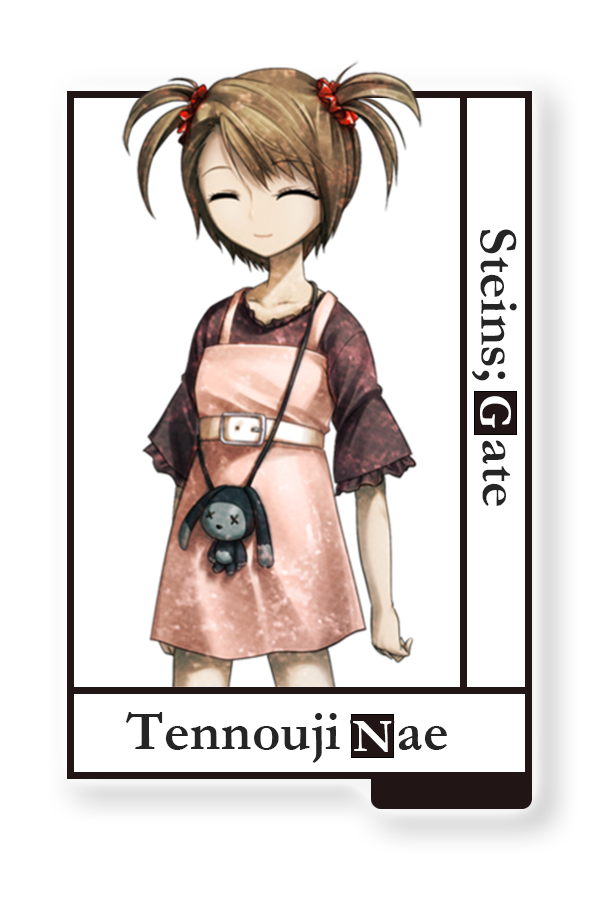
<style>
.page{position:relative;width:600px;height:900px;background:#ffffff}
.page>*{position:absolute;margin:0}
.t1{font:55.4px "Garamond-Bold";color:#252525}
.t2{font:47px "Garamond-Bold";color:#ffffff}
</style>
<div class="page">
<p class="t1" style="left:472px;top:229px;width:45px;height:277px;rotate:89deg">Steins;    ate</p>
<p class="t2" style="left:480px;top:396px;width:31px;height:32px;rotate:90deg">G</p>
<p class="t1" style="left:125px;top:712px;width:322px;height:51px">Tennouji    ae</p>
<p class="t2" style="left:353px;top:721px;width:39px;height:31px">N</p>
</div>
